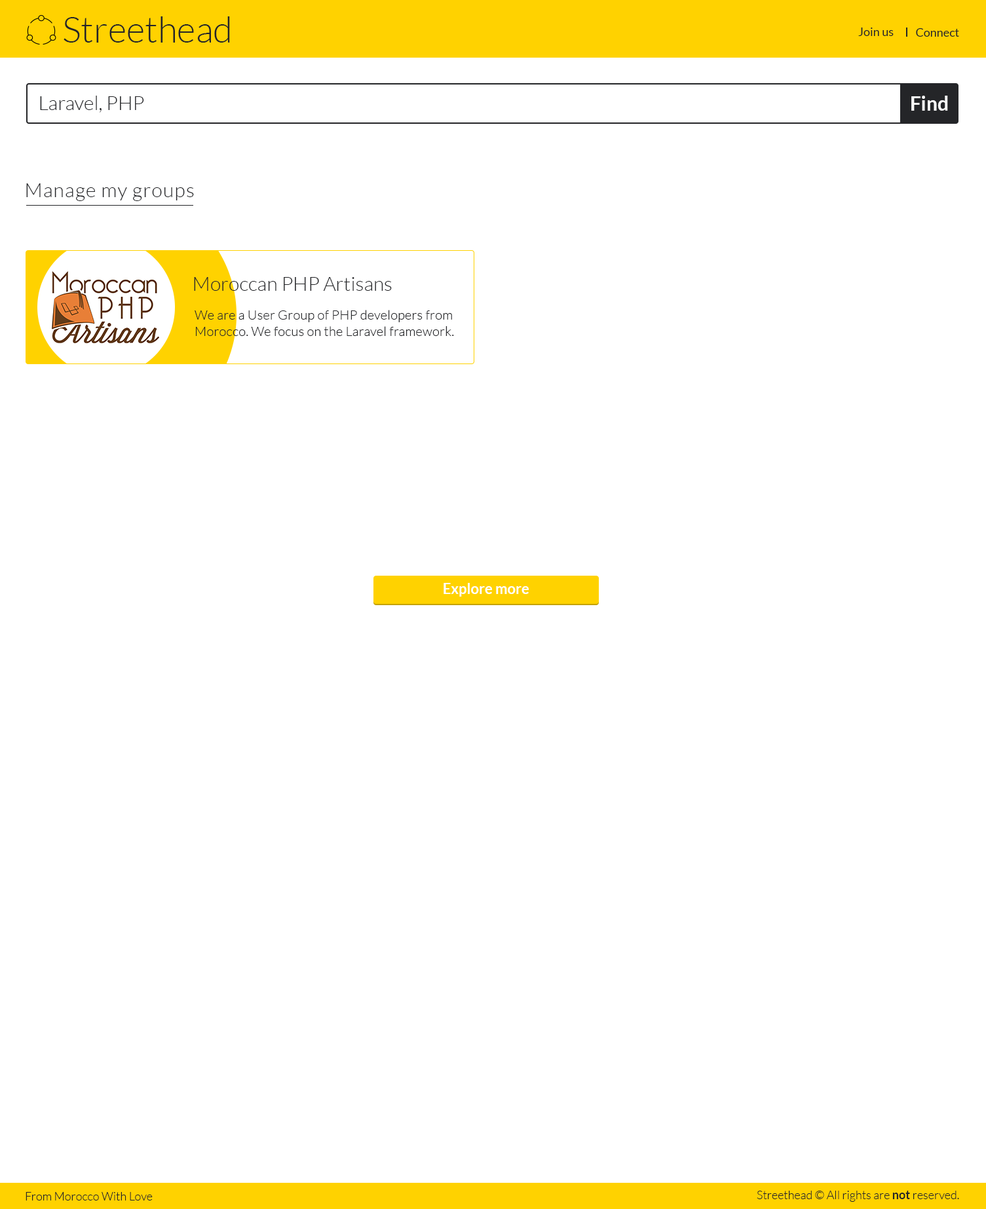
<style>
.page{position:relative;width:986px;height:1209px;background:#ffffff}
.page>*{position:absolute;margin:0}
.t1{font:36px "Lato-Light";color:#242528}
.t2{font:11.8px "Lato-Regular";color:#242528}
.t3{font:19.7px "Lato-Light";color:#242528}
.t4{font:19.7px "Lato-Bold";color:#fcfcfc}
.t5{font:19.7px "Lato-Light";letter-spacing:0.04em;color:#242528}
.t6{font:13.1px/16.4px "Lato-Light";letter-spacing:0.01em;color:#242528}
.t7{font:14.4px "Lato-Bold";color:#ffffff}
.t8{font:11.8px "Lato-Light";color:#242528}
.t9{font:11.8px "Lato-Bold";color:#242528}
</style>
<div class="page">
<p class="t1" style="left:64px;top:16px;width:166px;height:27px">Streethead</p>
<p class="t2" style="left:858px;top:28px;width:36px;height:8px">Join us</p>
<p class="t2" style="left:916px;top:28px;width:43px;height:9px">Connect</p>
<p class="t3" style="left:40px;top:96px;width:104px;height:17px">Laravel, PHP</p>
<p class="t4" style="left:911px;top:96px;width:37px;height:15px">Find</p>
<p class="t5" style="left:26px;top:183px;width:168px;height:18px">Manage my groups</p>
<p class="t3" style="left:194px;top:277px;width:198px;height:14px">Moroccan PHP Artisans</p>
<p class="t6" style="left:195px;top:310px;width:259px;height:26px">We are a User Group of PHP developers from <br>Morocco. We focus on the Laravel framework.</p>
<p class="t7" style="left:444px;top:583px;width:85px;height:14px">Explore more</p>
<p class="t8" style="left:26px;top:1192px;width:127px;height:9px">From Morocco With Love</p>
<p class="t8" style="left:757px;top:1191px;width:202px;height:11px">Streethead © All rights are <span class="t9">not </span>reserved.</p>
</div>
